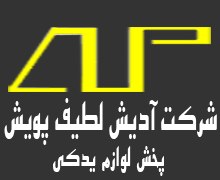
<style>
.page{position:relative;width:220px;height:180px;background:#333333}
.page>*{position:absolute;margin:0}
.t1{font:43px "BEsfehanBold";color:#ffffff;scale:0.51 1}
.t2{font:30px "BEsfehanBold";letter-spacing:0.025em;color:#ffffff;scale:0.55 1}
</style>
<div class="page">
<p class="t1" style="left:4px;top:98px;width:213px;height:47px">شرکت آديش لطيف پويش</p>
<p class="t2" style="left:53px;top:146px;width:111px;height:30px">پخش لوازم يدکي</p>
</div>
